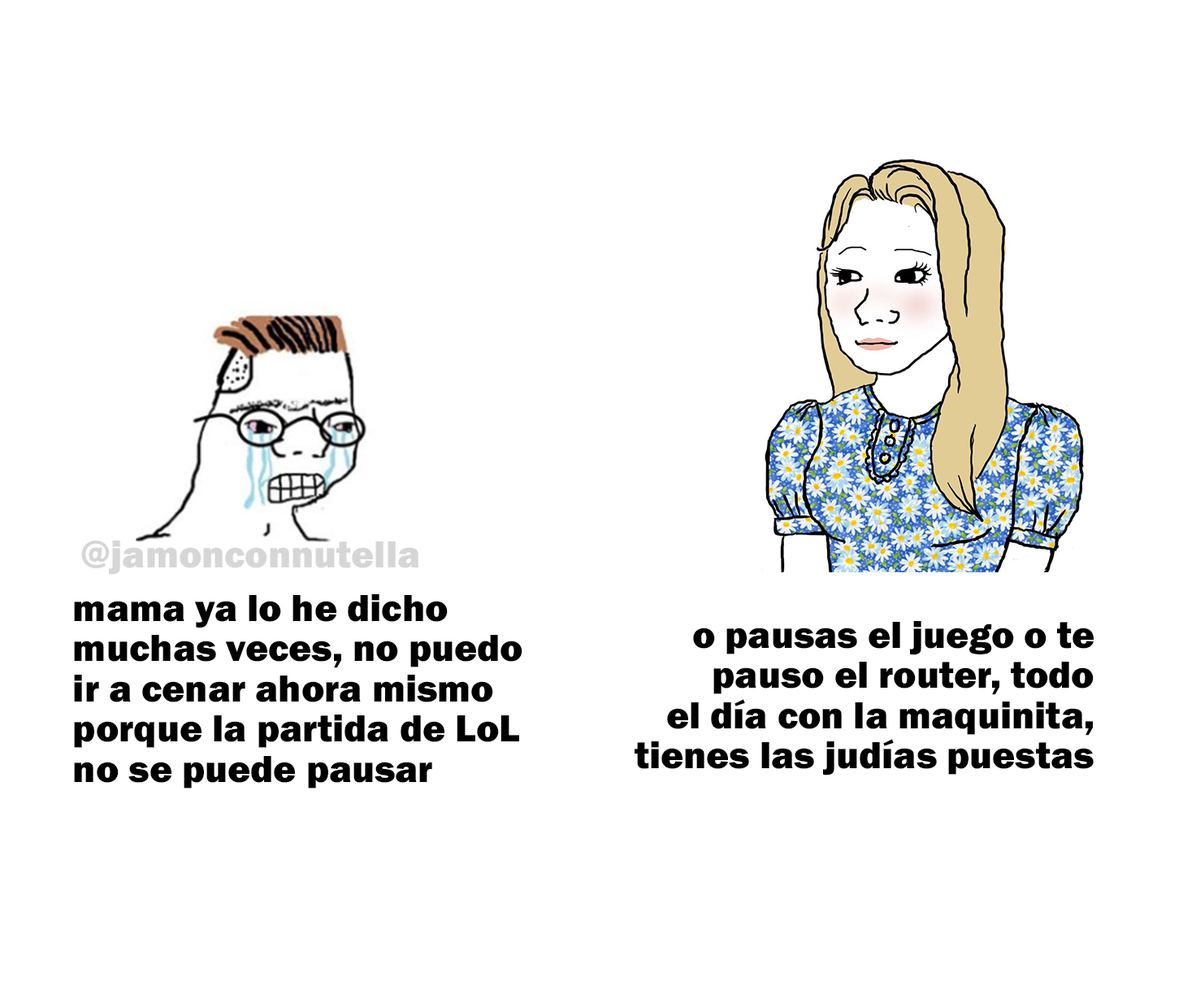
<style>
.page{position:relative;width:1183px;height:1008px;background:#ffffff}
.page>*{position:absolute;margin:0}
.t1{font:39px "FranklinGothic-Heavy";color:#d6d6d6}
.t2{font:39px "FranklinGothic-Heavy";color:#000000}
</style>
<div class="page">
<p class="t1" style="left:81px;top:540px;width:338px;height:35px">@jamonconnutella</p>
<p class="t2" style="left:74px;top:594px;width:449px;height:194px">mama ya lo he dicho<br>muchas veces, no puedo<br>ir a cenar ahora mismo<br>porque la partida de LoL<br>no se puede pausar</p>
<p class="t2" style="left:635px;top:621px;width:459px;height:154px;text-align:right">o pausas el juego o te<br>pauso el router, todo<br>el día con la maquinita,<br>tienes las judías puestas</p>
</div>
